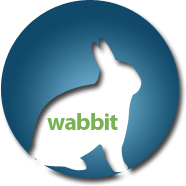
<style>
.page{position:relative;width:186px;height:186px;background:#ffffff}
.page>*{position:absolute;margin:0}
.t1{font:24px "MyriadPro-Bold";letter-spacing:-0.025em;color:#79b252}
</style>
<div class="page">
<p class="t1" style="left:47px;top:113px;width:71px;height:17px">wabbit</p>
</div>
